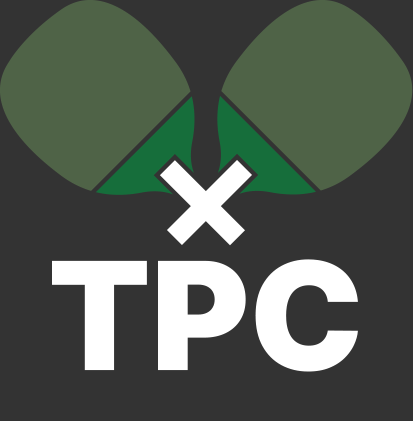
<style>
.page{position:relative;width:413px;height:421px;background:#333333}
.page>*{position:absolute;margin:0}
.t1{font:150px "Inter-Black";color:#ffffff}
</style>
<div class="page">
<p class="t1" style="left:52px;top:259px;width:306px;height:113px">TPC</p>
</div>
